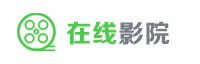
<style>
.page{position:relative;width:200px;height:64px;background:#ffffff}
.page>*{position:absolute;margin:0}
.t1{font:25px "FZZCHJW--GB1-0";letter-spacing:0.05em;color:#4eca4e}
.t2{font:25px "FZZCHJW--GB1-0";letter-spacing:0.05em;color:#757d86}
</style>
<div class="page">
<p class="t1" style="left:67px;top:21px;width:102px;height:24px">在线<span class="t2">影院</span></p>
</div>
